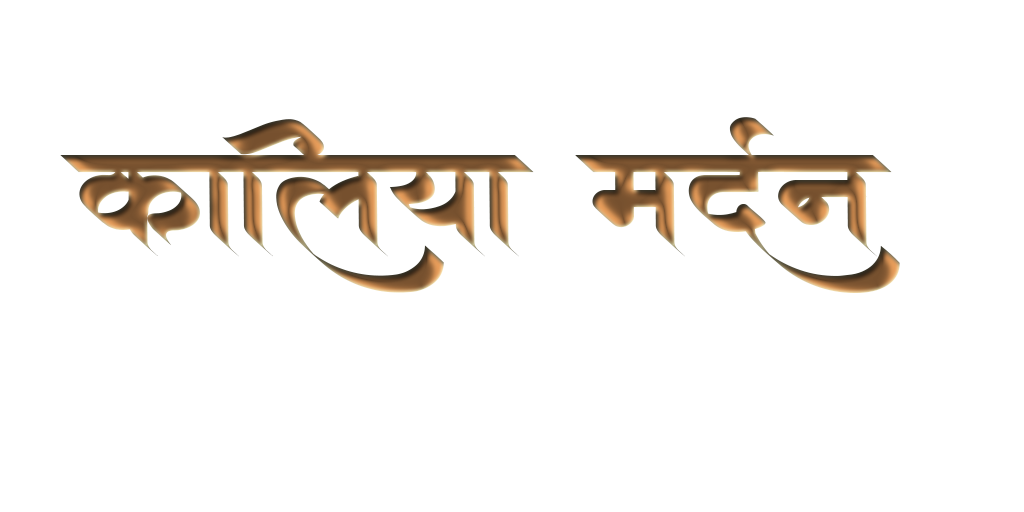
<style>
.page{position:relative;width:1024px;height:512px;background:#ffffff}
.page>*{position:absolute;margin:0}
.t1{font:112.7px "AMSAaditya";scale:1.3 1}
</style>
<div class="page">
<p class="t1" style="left:60px;top:117px;width:840px;height:176px">kailayaa madQna</p>
</div>
